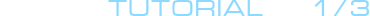
<style>
.page{position:relative;width:370px;height:16px;background:#ffffff}
.page>*{position:absolute;margin:0}
.t1{font:24px "MicrogrammaD-MediExte";letter-spacing:0.075em;color:#8dd9ff;text-transform:uppercase}
</style>
<div class="page">
<p class="t1" style="left:108px;top:0px;width:155px;height:16px">Tutorial</p>
</div>
